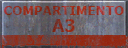
<style>
.page{position:relative;width:128px;height:48px}
.page>*{position:absolute;margin:0}
.t1{font:13.3px/14px "Verdana-Bold";scale:0.9 1}
.t2{font:17.8px/17px "Verdana-Bold";scale:0.9 1}
</style>
<div class="page">
<p class="t1" style="left:4px;top:6px;width:120px;height:26px;text-align:center">COMPARTIMENTO<br><span class="t2">A3</span></p>
</div>
